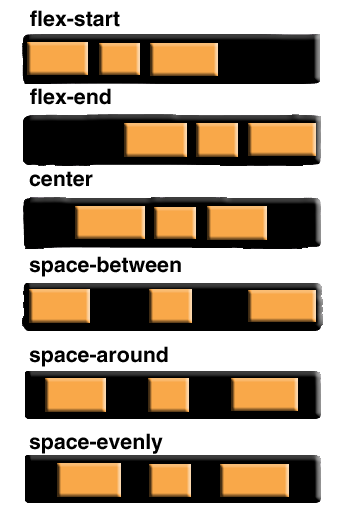
<style>
.page{position:relative;width:345px;height:518px;background:#ffffff}
.page>*{position:absolute;margin:0}
.t1{font:21.3px "HelveticaLTStd-Bold";color:#000000}
</style>
<div class="page">
<p class="t1" style="left:30px;top:10px;width:90px;height:17px">flex-start</p>
<p class="t1" style="left:30px;top:88px;width:81px;height:17px">flex-end</p>
<p class="t1" style="left:29px;top:171px;width:64px;height:16px">center</p>
<p class="t1" style="left:29px;top:256px;width:152px;height:21px">space-between</p>
<p class="t1" style="left:29px;top:346px;width:139px;height:21px">space-around</p>
<p class="t1" style="left:29px;top:433px;width:134px;height:21px">space-evenly</p>
</div>
